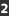
<style>
.page{position:relative;width:9px;height:16px;background:#333333}
.page>*{position:absolute;margin:0}
.t1{font:12.5px "RoundedMplus1c-ExtraBold";color:#ffffff}
</style>
<div class="page">
<p class="t1" style="left:1px;top:3px;width:7px;height:11px">2</p>
</div>
